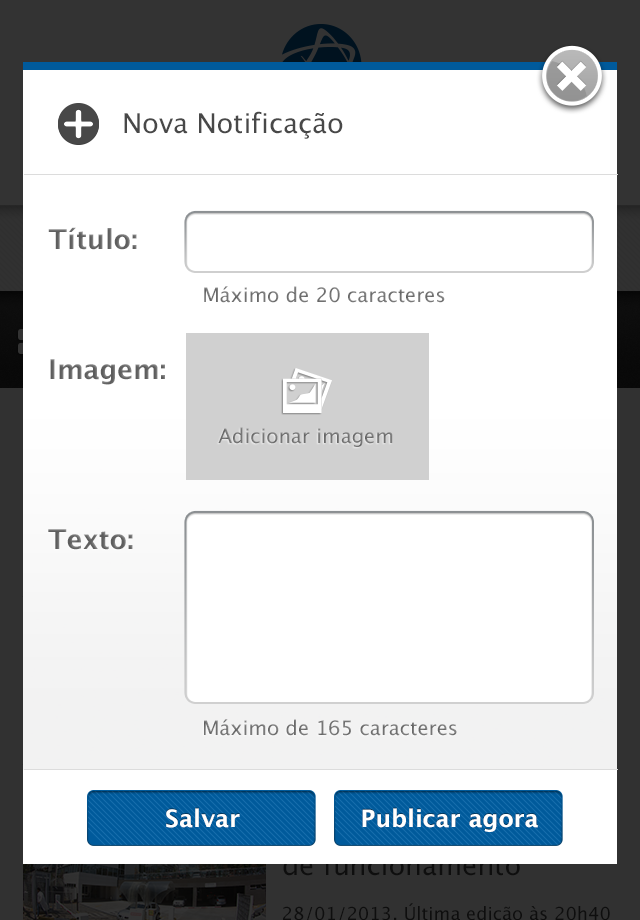
<style>
.page{position:relative;width:640px;height:920px;background:#ffffff}
.page>*{position:absolute;margin:0}
.t1{font:27.2px "LucidaGrande";color:#484848}
.t2{font:27.2px "LucidaGrande-Bold";color:#5d5d5d}
.t3{font:19.9px "LucidaGrande";color:#767676}
.t4{font:24px "LucidaGrande-Bold";color:#ffffff}
</style>
<div class="page">
<p class="t1" style="left:124px;top:111px;width:219px;height:28px">Nova Notificação</p>
<p class="t2" style="left:48px;top:227px;width:89px;height:23px">Título:</p>
<p class="t3" style="left:204px;top:286px;width:241px;height:17px">Máximo de 20 caracteres</p>
<p class="t2" style="left:50px;top:359px;width:115px;height:26px">Imagem:</p>
<p class="t3" style="left:218px;top:427px;width:175px;height:20px">Adicionar imagem</p>
<p class="t2" style="left:48px;top:529px;width:85px;height:21px">Texto:</p>
<p class="t3" style="left:204px;top:719px;width:253px;height:17px">Máximo de 165 caracteres</p>
<p class="t4" style="left:166px;top:808px;width:74px;height:20px">Salvar</p>
<p class="t4" style="left:362px;top:808px;width:176px;height:24px">Publicar agora</p>
</div>
